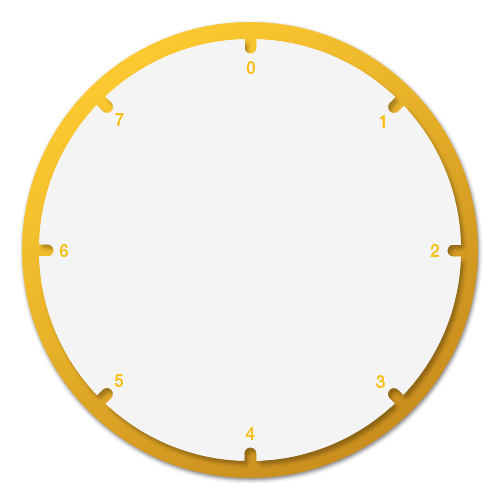
<style>
.page{position:relative;width:500px;height:500px;background:#f4f4f4}
.page>*{position:absolute;margin:0}
.t1{font:18px "HelveticaNeueLTStd-Md";color:#f9bb07;scale:0.93 1}
</style>
<div class="page">
<p class="t1" style="left:246px;top:61px;width:9px;height:13px">0</p>
<p class="t1" style="left:115px;top:113px;width:9px;height:13px">7</p>
<p class="t1" style="left:379px;top:115px;width:6px;height:13px">1</p>
<p class="t1" style="left:59px;top:244px;width:9px;height:13px">6</p>
<p class="t1" style="left:430px;top:244px;width:9px;height:13px">2</p>
<p class="t1" style="left:114px;top:374px;width:9px;height:13px">5</p>
<p class="t1" style="left:376px;top:375px;width:9px;height:13px">3</p>
<p class="t1" style="left:246px;top:427px;width:9px;height:13px">4</p>
</div>
